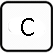
<style>
.page{position:relative;width:53px;height:53px;background:#ffffff}
.page>*{position:absolute;margin:0}
.t1{font:27.8px "Calibri";color:#000000}
</style>
<div class="page">
<p class="t1" style="left:21px;top:18px;width:13px;height:18px">C</p>
</div>
